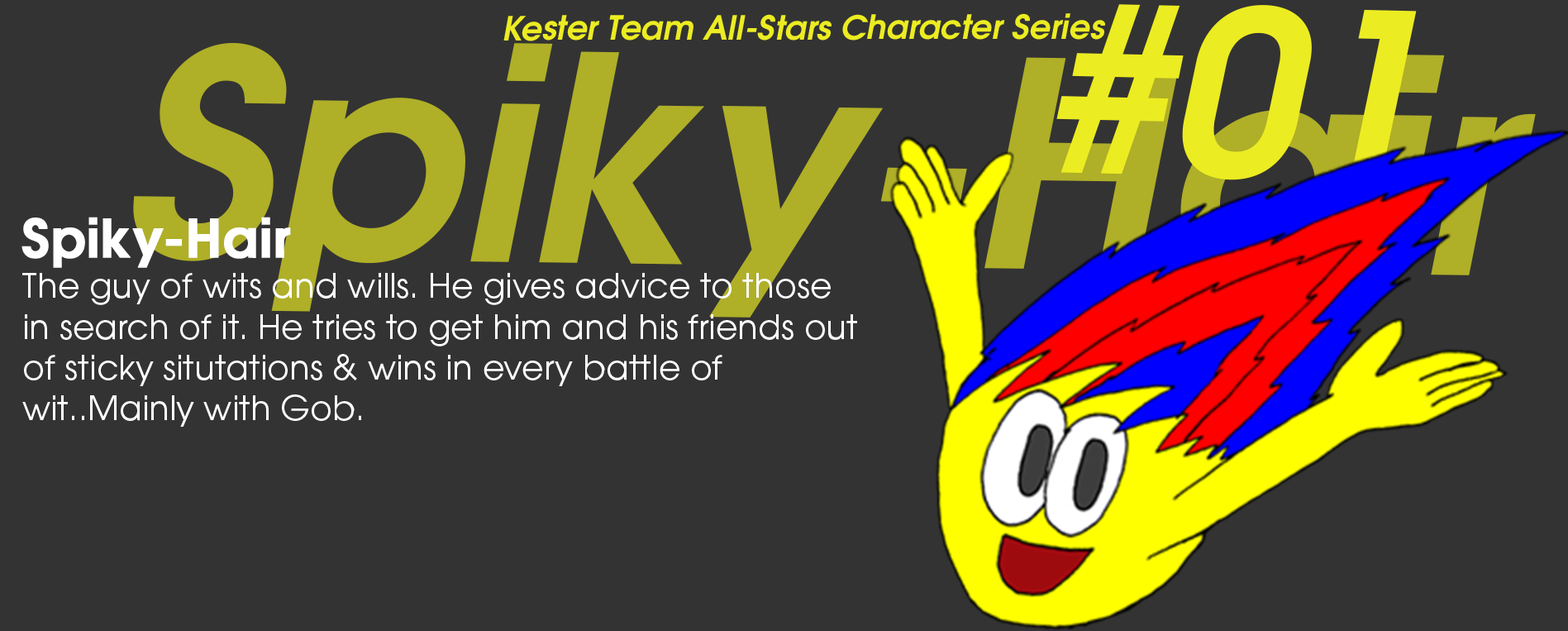
<style>
.page{position:relative;width:1568px;height:631px;background:#333333}
.page>*{position:absolute;margin:0}
.t1{font:229px "TeXGyreAdventor-BoldItalic";color:#ecec22}
.t2{font:33.1px "TeXGyreAdventor-BoldItalic";color:#ecec22}
.t3{font:285.5px "TeXGyreAdventor-BoldItalic";color:#afaf28}
.t4{font:33.9px "TeXGyreAdventor-Regular";color:#ffffff}
.t5{font:52.4px/61.7px "TeXGyreAdventor-Bold";color:#ffffff;font-weight:bold}
</style>
<div class="page">
<p class="t1" style="left:1056px;top:4px;width:361px;height:176px;rotate:1deg">#01</p>
<p class="t2" style="left:503px;top:13px;width:602px;height:28px">Kester Team All-Stars Character Series</p>
<p class="t3" style="left:133px;top:43px;width:1403px;height:274px;rotate:1deg">Spiky-Hair</p>
<p class="t4" style="left:21px;top:217px;width:836px;height:210px"><span class="t5">Spiky-Hair<br></span>The guy of wits and wills. He gives advice to those in search of it. He tries to get him and his friends out of sticky situtations &amp; wins in every battle of wit..Mainly with Gob.</p>
</div>
